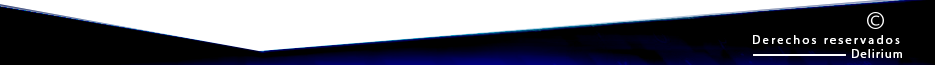
<style>
.page{position:relative;width:935px;height:65px;background:#ffffff}
.page>*{position:absolute;margin:0}
.t1{font:12px "MyriadPro-Regular";letter-spacing:0.2em;color:#ffffff}
.t2{font:12px "MyriadPro-Regular";letter-spacing:0.1em;color:#ffffff}
</style>
<div class="page">
<p class="t1" style="left:753px;top:35px;width:147px;height:9px">Derechos reservados</p>
<p class="t2" style="left:852px;top:49px;width:50px;height:9px">Delirium</p>
</div>
